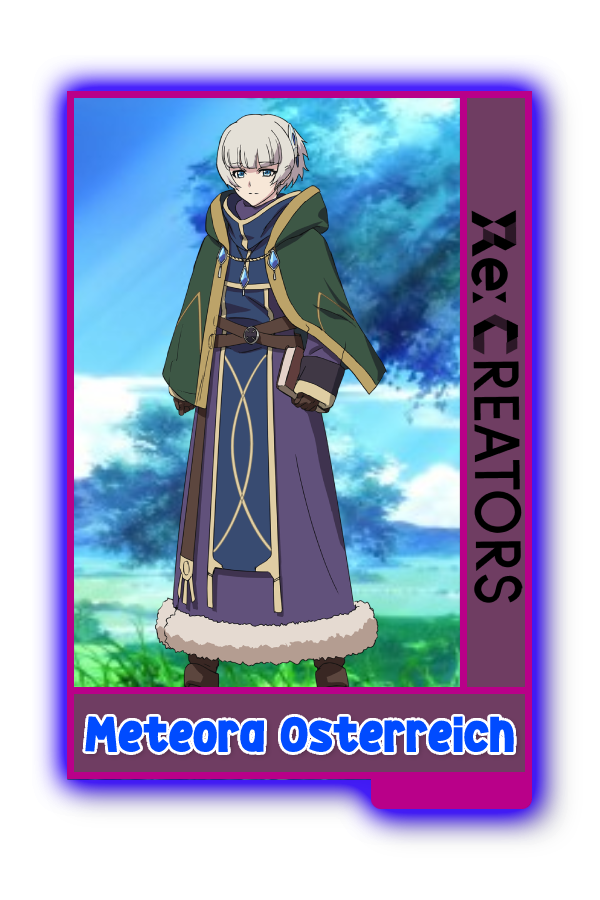
<style>
.page{position:relative;width:600px;height:900px;background:#ffffff}
.page>*{position:absolute;margin:0}
.t1{font:60px "Yokelvision";color:#004bff}
</style>
<div class="page">
<p class="t1" style="left:85px;top:716px;width:429px;height:36px">Meteora Osterreich</p>
</div>
